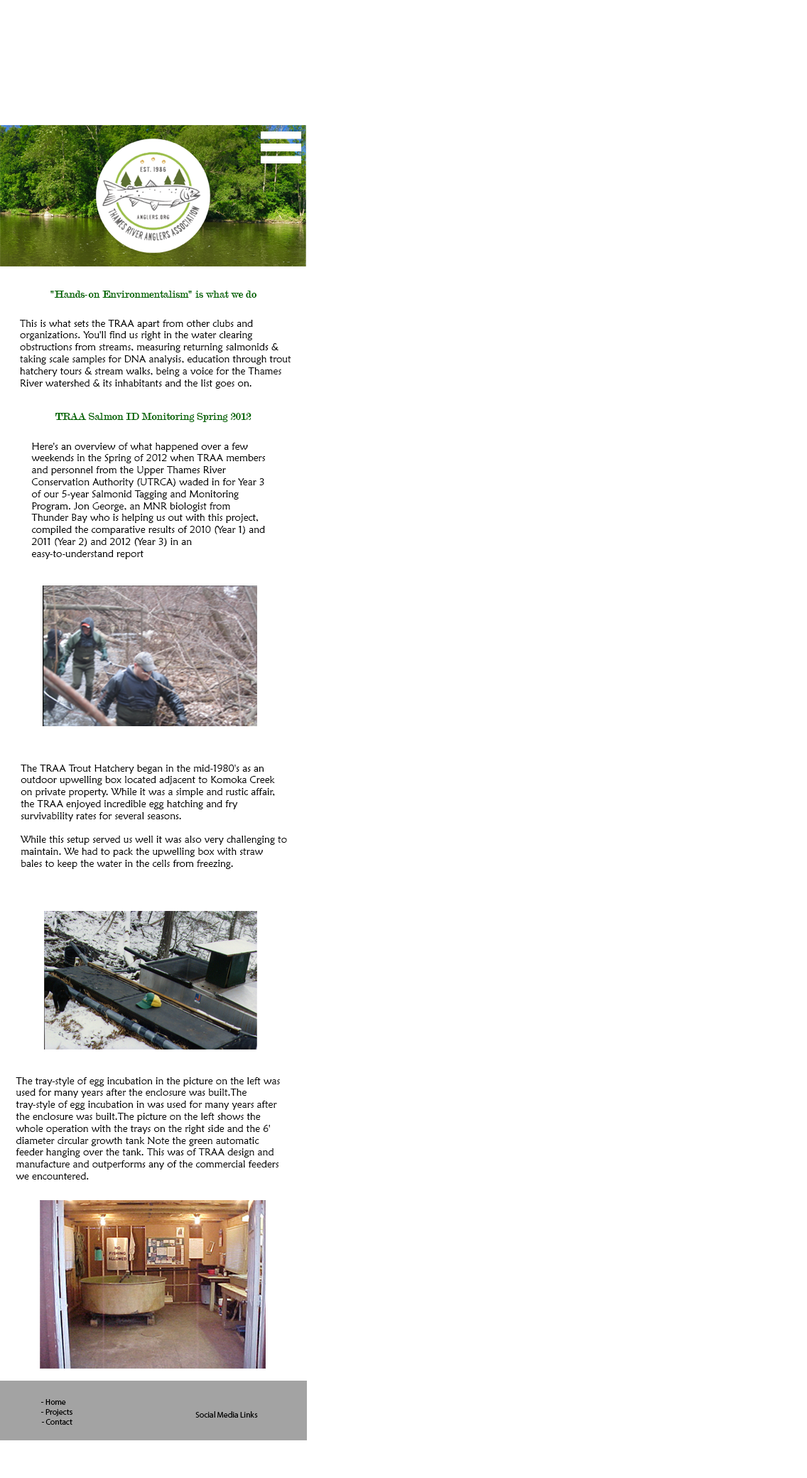
<style>
.page{position:relative;width:807px;height:1478px;background:#ffffff}
.page>*{position:absolute;margin:0}
.t1{font:11.4px "Modern-Regular";color:#006600}
.t2{font:9.9px "MaiandraGD-Regular";color:#000000}
.t3{font:8.2px "MyriadPro-Regular";color:#000000}
</style>
<div class="page">
<p class="t1" style="left:50px;top:291px;width:207px;height:7px">"Hands-on Environmentalism" is what we do</p>
<p class="t2" style="left:20px;top:320px;width:271px;height:69px">This is what sets the TRAA apart from other clubs and organizations. You'll find us right in the water clearing obstructions from streams, measuring returning salmonids &amp; taking scale samples for DNA analysis, education through trout hatchery tours &amp; stream walks, being a voice for the Thames River watershed &amp; its inhabitants and the list goes on.</p>
<p class="t1" style="left:55px;top:413px;width:196px;height:9px">TRAA Salmon ID Monitoring Spring 2012</p>
<p class="t2" style="left:31px;top:443px;width:235px;height:116px">Here's an overview of what happened over a few weekends in the Spring of 2012 when TRAA members and personnel from the Upper Thames River Conservation Authority (UTRCA) waded in for Year 3 of our 5-year Salmonid Tagging and Monitoring Program. Jon George, an MNR biologist from Thunder Bay who is helping us out with this project, compiled the comparative results of 2010 (Year 1) and 2011 (Year 2) and 2012 (Year 3) in an easy-to-understand report</p>
<p class="t2" style="left:20px;top:764px;width:267px;height:105px">The TRAA Trout Hatchery began in the mid-1980's as an outdoor upwelling box located adjacent to Komoka Creek on private property. While it was a simple and rustic affair, the TRAA enjoyed incredible egg hatching and fry survivability rates for several seasons.<br><br>While this setup served us well it was also very challenging to maintain. We had to pack the upwelling box with straw bales to keep the water in the cells from freezing.</p>
<p class="t2" style="left:16px;top:1077px;width:264px;height:102px">The tray-style of egg incubation in the picture on the left was used for many years after the enclosure was built.The tray-style of egg incubation in was used for many years after the enclosure was built.The picture on the left shows the whole operation with the trays on the right side and the 6' diameter circular growth tank Note the green automatic feeder hanging over the tank. This was of TRAA design and manufacture and outperforms any of the commercial feeders we encountered.</p>
<p class="t3" style="left:41px;top:1399px;width:31px;height:25px;text-align:center">- Home<br>    - Projects<br>    - Contact</p>
<p class="t3" style="left:195px;top:1411px;width:63px;height:6px">Social Media Links</p>
</div>
